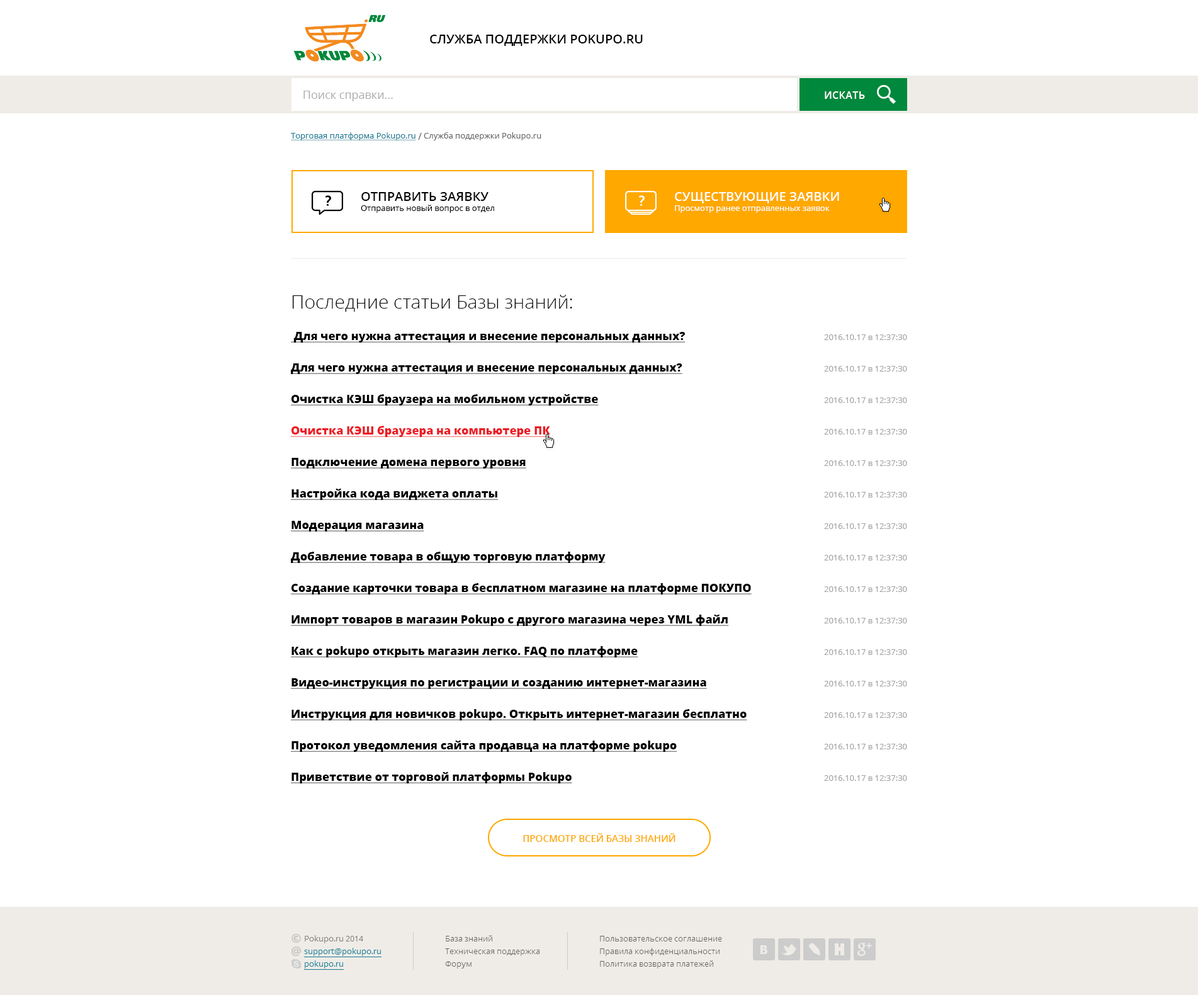
<style>
.page{position:relative;width:1198px;height:995px;background:#ffffff}
.page>*{position:absolute;margin:0}
.t1{font:12.6px "OpenSans-Semibold";color:#000000;text-transform:uppercase}
.t2{font:11.3px "OpenSans";color:#adadad}
.t3{font:10.1px "OpenSans-Semibold";letter-spacing:0.025em;color:#ffffff;text-transform:uppercase}
.t4{font:8.2px "OpenSans";color:#177a93;text-decoration:underline}
.t5{font:9.4px "OpenSans";color:#666666}
.t6{font:8.2px "OpenSans";color:#666666}
.t7{font:8.2px/10.1px "OpenSans";color:#000000}
.t8{font:12.6px/10.1px "OpenSans-Semibold";color:#000000;text-transform:uppercase}
.t9{font:8.2px/10.1px "OpenSans";color:#ffffff}
.t10{font:12.6px/10.1px "OpenSans-Semibold";color:#ffffff;text-transform:uppercase}
.t11{font:18.9px "OpenSans-Light";color:#000000}
.t12{font:11.3px/31.5px "OpenSans-Extrabold";color:#000000;text-decoration:underline}
.t13{font:11.3px/31.5px "OpenSans-Extrabold";color:#ed1c24;text-decoration:underline}
.t14{font:8.2px/31.5px "OpenSans";color:#a3a3a3}
.t15{font:9.4px "OpenSans-Semibold";color:#ffa800;text-transform:uppercase}
</style>
<div class="page">
<p class="t1" style="left:430px;top:35px;width:213px;height:11px">Служба поддержки Pokupo.ru</p>
<p class="t2" style="left:304px;top:91px;width:89px;height:10px">Поиск справки...</p>
<p class="t3" style="left:825px;top:91px;width:40px;height:8px">искать</p>
<p class="t4" style="left:290px;top:132px;width:252px;height:8px">Торговая платформа Pokupo.ru <span class="t5">/</span><span class="t6"> Служба поддержки Pokupo.ru</span></p>
<p class="t7" style="left:361px;top:192px;width:133px;height:21px"><span class="t8">Отправить заявку<br></span>Отправить новый вопрос в отдел</p>
<p class="t9" style="left:675px;top:192px;width:164px;height:21px"><span class="t10">существующие заявки<br></span>Просмотр ранее отправленных заявок</p>
<p class="t9" style="left:675px;top:192px;width:164px;height:21px"><span class="t10">существующие заявки<br></span>Просмотр ранее отправленных заявок</p>
<p class="t11" style="left:292px;top:295px;width:280px;height:17px">Последние статьи Базы знаний:</p>
<p class="t12" style="left:291px;top:332px;width:461px;height:451px">Для чего нужна аттестация и внесение персональных данных?<br>Для чего нужна аттестация и внесение персональных данных?<br>Очистка КЭШ браузера на мобильном устройстве<br><span class="t13">Очистка КЭШ браузера на компьютере ПК<br></span>Подключение домена первого уровня<br>Настройка кода виджета оплаты<br>Модерация магазина<br>Добавление товара в общую торговую платформу<br>Создание карточки товара в бесплатном магазине на платформе ПОКУПО<br>Импорт товаров в магазин Pokupo с другого магазина через YML файл<br>Как с pokupo открыть магазин легко. FAQ по платформе<br>Видео-инструкция по регистрации и созданию интернет-магазина<br>Инструкция для новичков pokupo. Открыть интернет-магазин бесплатно<br>Протокол уведомления сайта продавца на платформе pokupo<br>Приветствие от торговой платформы Pokupo</p>
<p class="t14" style="left:824px;top:334px;width:83px;height:447px;text-align:right">2016.10.17 в 12:37:30<br>2016.10.17 в 12:37:30<br>2016.10.17 в 12:37:30<br>2016.10.17 в 12:37:30<br>2016.10.17 в 12:37:30<br>2016.10.17 в 12:37:30<br>2016.10.17 в 12:37:30<br>2016.10.17 в 12:37:30<br>2016.10.17 в 12:37:30<br>2016.10.17 в 12:37:30<br>2016.10.17 в 12:37:30<br>2016.10.17 в 12:37:30<br>2016.10.17 в 12:37:30<br>2016.10.17 в 12:37:30<br>2016.10.17 в 12:37:30</p>
<p class="t15" style="left:523px;top:833px;width:153px;height:9px">Просмотр всей Базы знаний</p>
</div>
